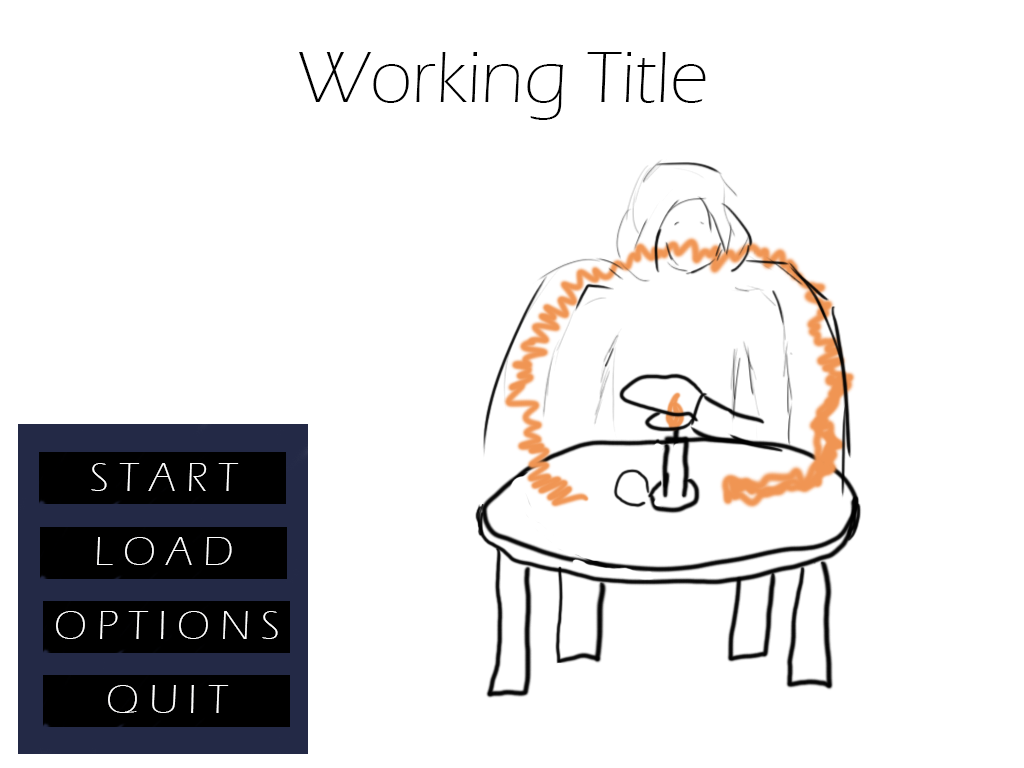
<style>
.page{position:relative;width:1024px;height:768px;background:#ffffff}
.page>*{position:absolute;margin:0}
.t1{font:75px "ErasITC-Light";color:#000000}
.t2{font:41.7px "ErasITC-Light";color:#ffffff}
</style>
<div class="page">
<p class="t1" style="left:299px;top:52px;width:407px;height:68px">Working Title</p>
<p class="t2" style="left:91px;top:463px;width:148px;height:28px">S T A R T</p>
<p class="t2" style="left:97px;top:537px;width:135px;height:28px">L O A D</p>
<p class="t2" style="left:56px;top:611px;width:222px;height:28px">O P T I O N S</p>
<p class="t2" style="left:108px;top:685px;width:121px;height:28px">Q U I T</p>
</div>
